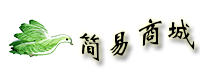
<style>
.page{position:relative;width:200px;height:80px;background:#ffffff}
.page>*{position:absolute;margin:0}
.t1{font:30px "STXinwei";color:#000000}
</style>
<div class="page">
<p class="t1" style="left:79px;top:18px;width:116px;height:43px">简易商城</p>
</div>
